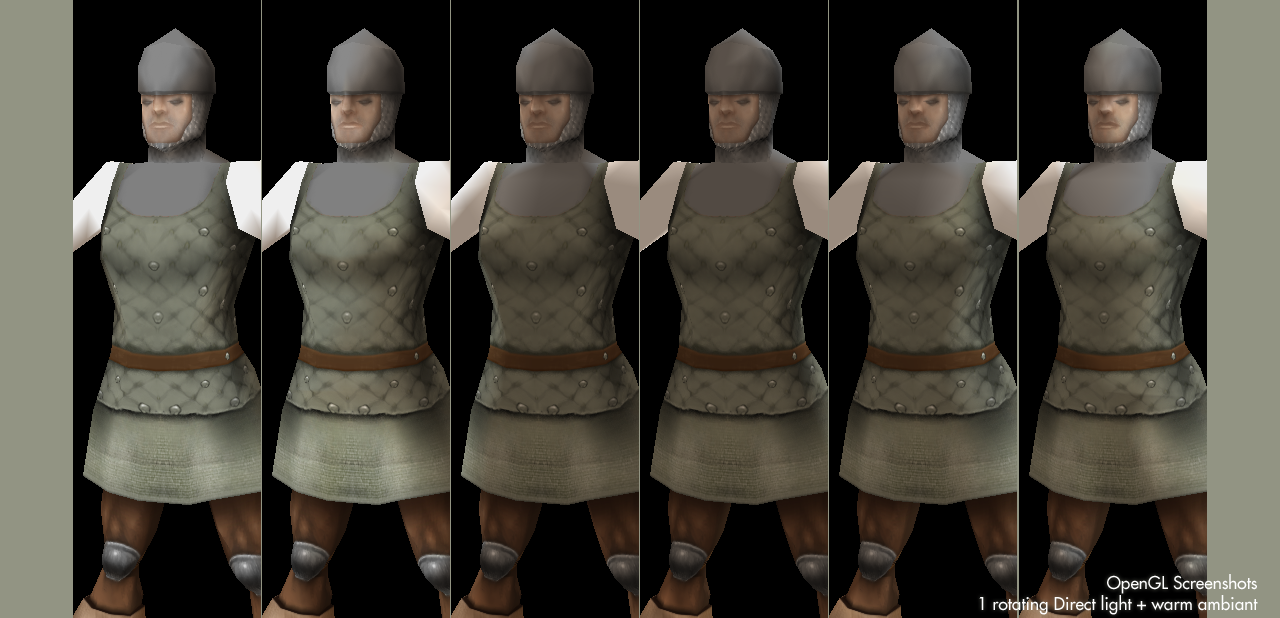
<style>
.page{position:relative;width:1280px;height:618px;background:#000000}
.page>*{position:absolute;margin:0}
.t1{font:17.3px "Futura";color:#ffffff}
</style>
<div class="page">
<p class="t1" style="left:979px;top:574px;width:279px;height:41px;text-align:right">OpenGL Screenshots<br>1 rotating Direct light + warm ambiant</p>
</div>
